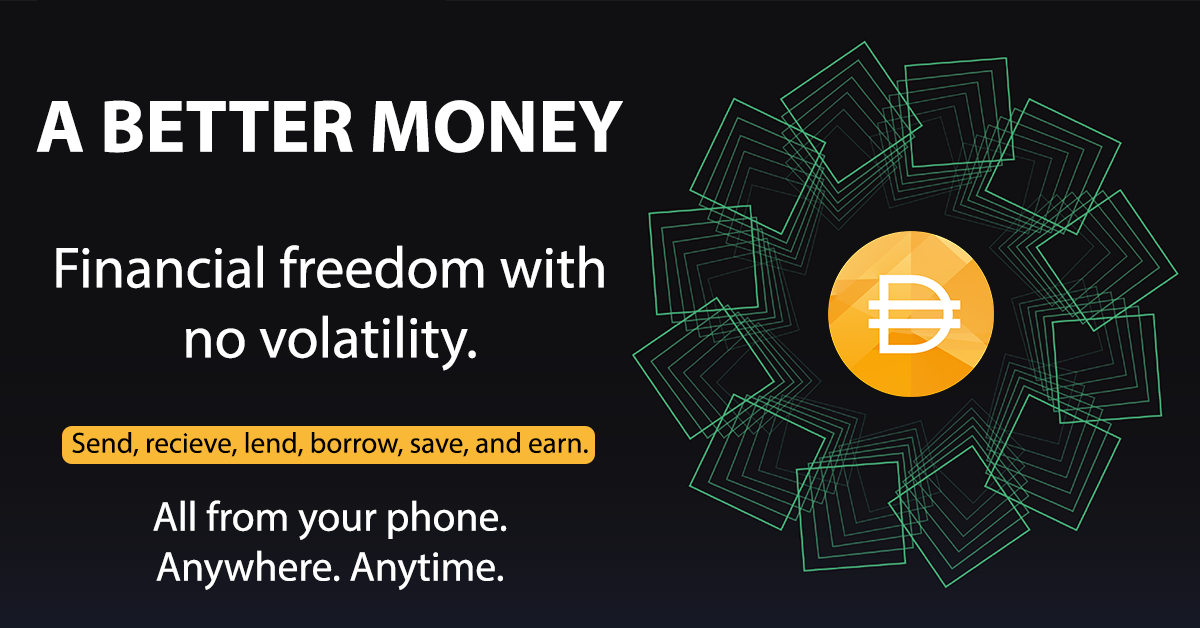
<style>
.page{position:relative;width:1200px;height:628px;background:#100f11}
.page>*{position:absolute;margin:0}
.t1{font:75px "MyriadPro-Bold";color:#ffffff}
.t2{font:58.3px "MyriadPro-Regular";color:#ffffff}
.t3{font:29.2px "MyriadPro-Regular";color:#000000}
.t4{font:41.7px "MyriadPro-Regular";color:#ffffff}
</style>
<div class="page">
<p class="t1" style="left:36px;top:100px;width:587px;height:53px">A BETTER MONEY</p>
<p class="t2" style="left:56px;top:245px;width:548px;height:126px;text-align:center">Financial freedom with no volatility.</p>
<p class="t3" style="left:72px;top:432px;width:516px;height:25px">Send, recieve, lend, borrow, save, and earn.</p>
<p class="t4" style="left:153px;top:500px;width:354px;height:90px;text-align:center">All from your phone. <br>Anywhere. Anytime.</p>
</div>
